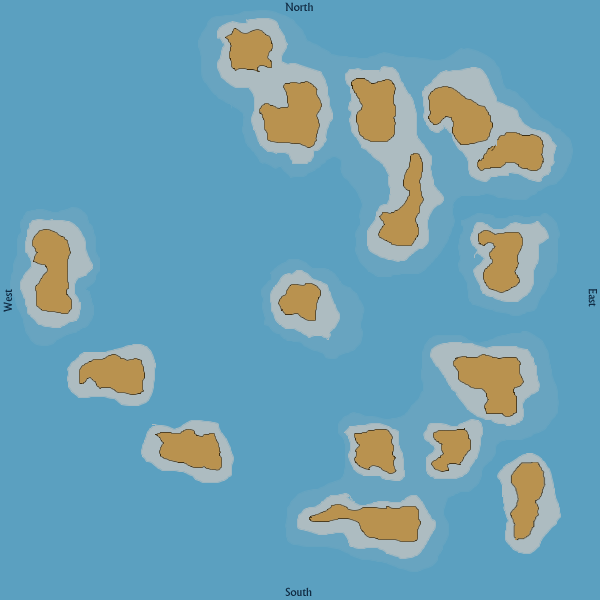
<style>
.page{position:relative;width:600px;height:600px;background:#5ba0c0}
.page>*{position:absolute;margin:0}
.t1{font:12px "Narkisim";color:#102b43}
</style>
<div class="page">
<p class="t1" style="left:285px;top:2px;width:28px;height:9px">North</p>
<p class="t1" style="left:3px;top:289px;width:9px;height:23px;rotate:-90deg">West</p>
<p class="t1" style="left:588px;top:289px;width:9px;height:18px;rotate:90deg">East</p>
<p class="t1" style="left:285px;top:587px;width:27px;height:9px">South</p>
</div>
